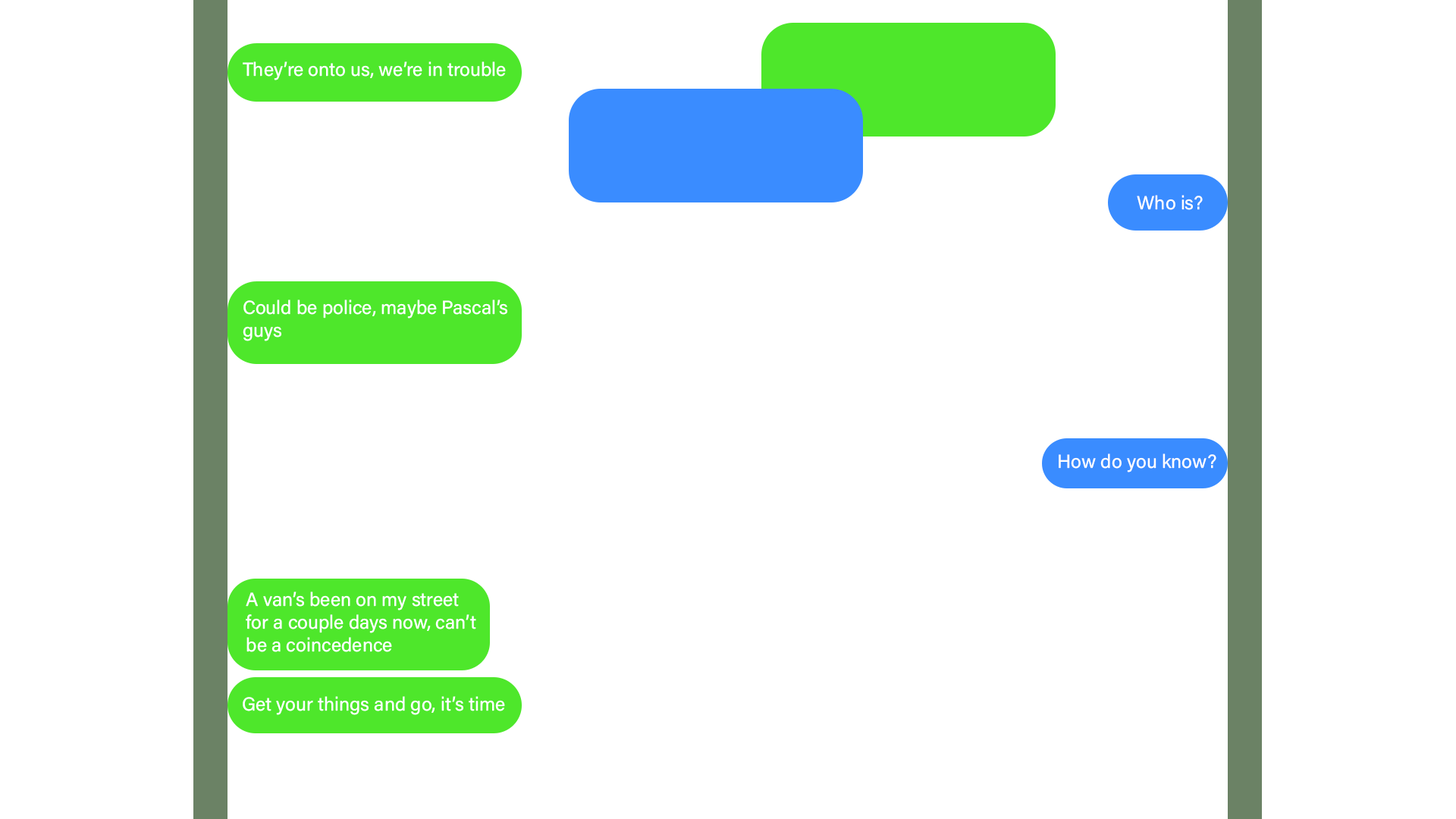
<style>
.page{position:relative;width:1456px;height:819px;background:#ffffff}
.page>*{position:absolute;margin:0}
.t1{font:19px "AcuminConcept-Regular";color:#ffffff}
</style>
<div class="page">
<p class="t1" style="left:243px;top:61px;width:263px;height:19px">They’re onto us, we’re in trouble</p>
<p class="t1" style="left:1137px;top:195px;width:66px;height:15px">Who is?</p>
<p class="t1" style="left:243px;top:300px;width:264px;height:41px">Could be police, maybe Pascal’s <br>guys</p>
<p class="t1" style="left:1059px;top:453px;width:157px;height:19px">How do you know?</p>
<p class="t1" style="left:246px;top:591px;width:230px;height:61px">A van’s been on my street<br>for a couple days now, can’t<br>be a coincedence</p>
<p class="t1" style="left:243px;top:696px;width:262px;height:19px">Get your things and go, it’s time</p>
</div>
